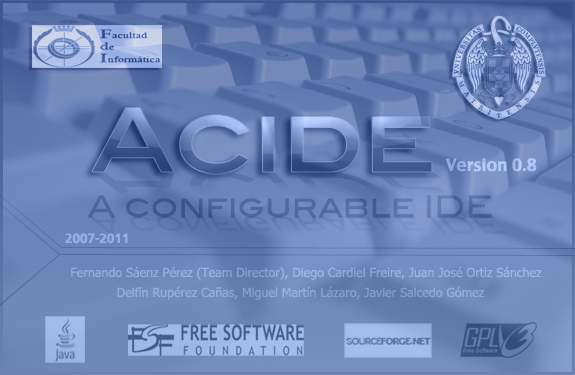
<style>
.page{position:relative;width:575px;height:375px}
.page>*{position:absolute;margin:0}
.t1{font:16.7px "CharcoalCY";color:#afc7fd}
.t2{font:12.5px "CharcoalCY";color:#97afe4}
.t3{font:12.5px "Tahoma";color:#94abe0}
</style>
<div class="page">
<p class="t1" style="left:445px;top:158px;width:92px;height:14px">Version 0.8</p>
<p class="t2" style="left:65px;top:233px;width:63px;height:11px">2007-2011</p>
<p class="t3" style="left:71px;top:266px;width:471px;height:34px;text-align:center">Fernando Sáenz Pérez (Team Director), Diego Cardiel Freire, Juan José Ortiz Sánchez<br>Delfín Rupérez Cañas, Miguel Martín Lázaro, Javier Salcedo Gómez</p>
</div>
